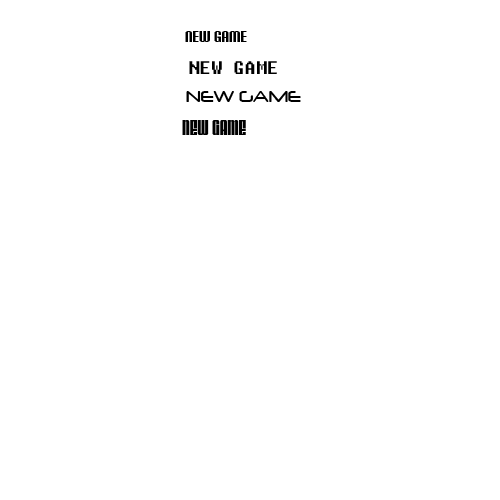
<style>
.page{position:relative;width:500px;height:500px;background:#ffffff}
.page>*{position:absolute;margin:0}
.t1{font:18px "CarbonBlock";color:#000000}
.t2{font:18px "Fixedsys";color:#000000}
.t3{font:18px "Neuropol";color:#000000}
.t4{font:18px "VelvendaCooler";color:#000000}
</style>
<div class="page">
<p class="t1" style="left:185px;top:31px;width:62px;height:11px">NEW GAME</p>
<p class="t2" style="left:189px;top:61px;width:88px;height:13px">NEW GAME</p>
<p class="t3" style="left:186px;top:91px;width:115px;height:11px">NEW GAME</p>
<p class="t4" style="left:182px;top:120px;width:64px;height:15px">NEW GAME</p>
</div>
